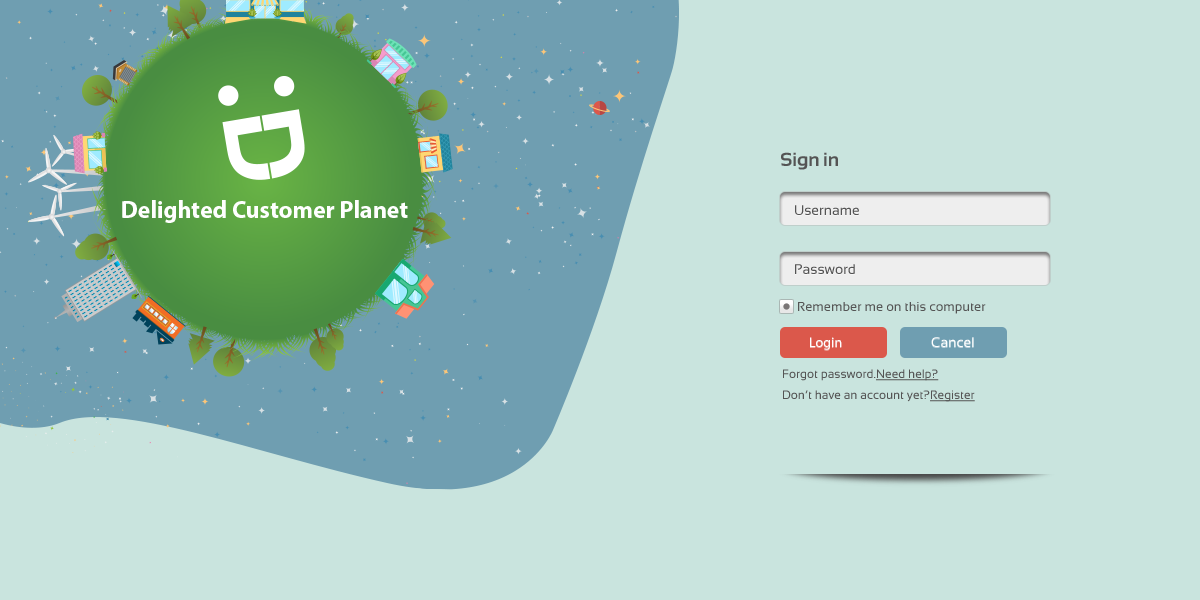
<style>
.page{position:relative;width:1200px;height:600px;background:#c9e4de}
.page>*{position:absolute;margin:0}
.t1{font:19px "Sansation-Bold";color:#545454}
.t2{font:14px "Sansation";color:#545454}
.t3{font:13px "Sansation";color:#545454}
.t4{font:14px "MyriadPro-Regular";color:#ffffff}
.t5{font:14px "Sansation";color:#ffffff}
.t6{font:12px "Sansation";color:#545454}
.t7{font:12px "Sansation";color:#545454;text-decoration:underline}
</style>
<div class="page">
<p class="t1" style="left:781px;top:152px;width:57px;height:18px">Sign in</p>
<p class="t2" style="left:795px;top:205px;width:64px;height:10px">Username</p>
<p class="t2" style="left:795px;top:264px;width:60px;height:10px">Password</p>
<p class="t3" style="left:798px;top:302px;width:188px;height:12px">Remember me on this computer</p>
<p class="t4" style="left:810px;top:337px;width:32px;height:13px">Login</p>
<p class="t5" style="left:931px;top:337px;width:43px;height:10px">Cancel</p>
<p class="t6" style="left:783px;top:369px;width:93px;height:12px">Forgot password.</p>
<p class="t7" style="left:876px;top:369px;width:63px;height:12px">Need help?</p>
<p class="t6" style="left:783px;top:390px;width:147px;height:12px">Don’t have an account yet?</p>
<p class="t7" style="left:930px;top:390px;width:45px;height:12px">Register</p>
</div>
